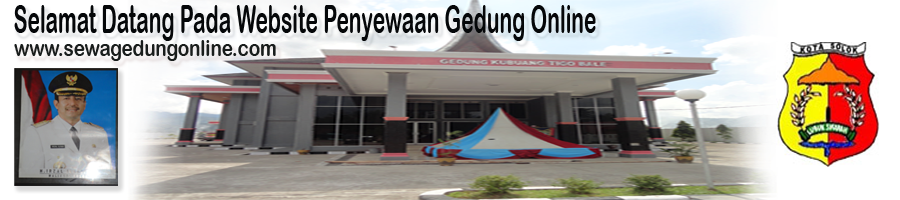
<style>
.page{position:relative;width:900px;height:200px}
.page>*{position:absolute;margin:0}
.t1{font:38.6px "ArialRoundedMTBold";color:#050709;scale:0.54 1}
.t2{font:22.9px "ArialRoundedMTBold";color:#191d1c;scale:0.81 1}
</style>
<div class="page">
<p class="t1" style="left:14px;top:5px;width:582px;height:36px">Selamat Datang Pada Website Penyewaan Gedung Online</p>
<p class="t2" style="left:14px;top:40px;width:262px;height:21px">www.sewagedungonline.com</p>
</div>
